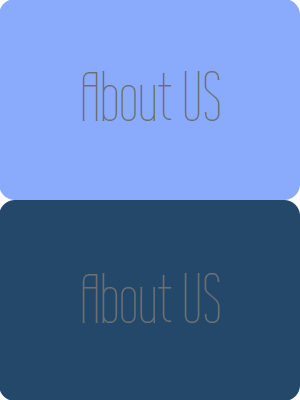
<style>
.page{position:relative;width:300px;height:400px;background:#8aaafb}
.page>*{position:absolute;margin:0}
.t1{font:69px "WireOne";color:#6b7072}
</style>
<div class="page">
<p class="t1" style="left:82px;top:71px;width:138px;height:50px">About US</p>
<p class="t1" style="left:82px;top:273px;width:138px;height:50px">About US</p>
</div>
